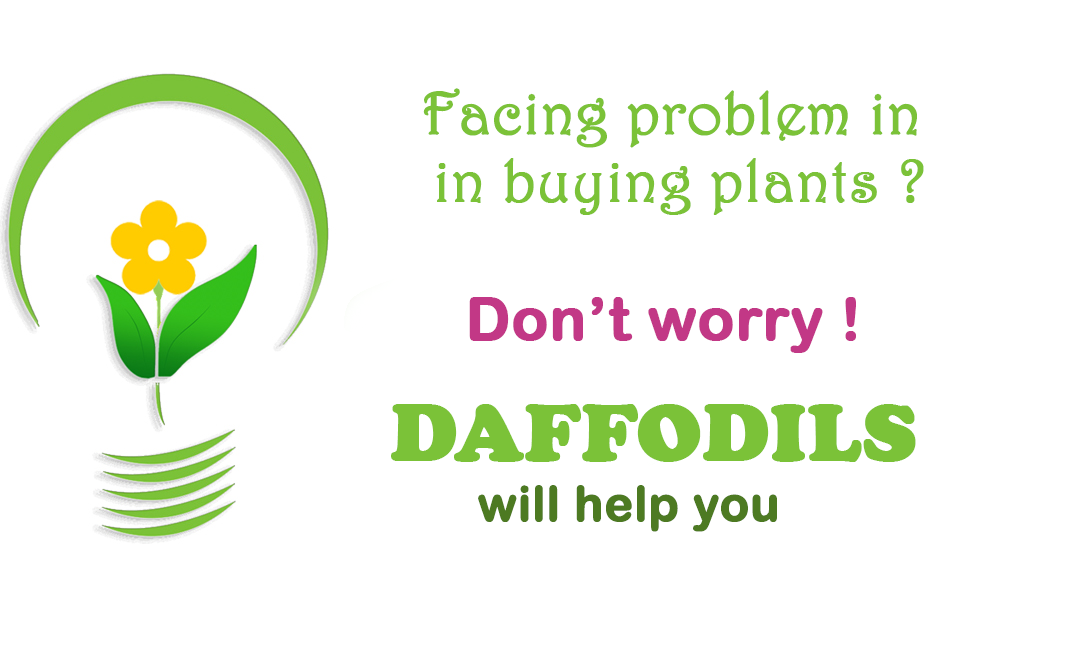
<style>
.page{position:relative;width:1080px;height:648px;background:#ffffff}
.page>*{position:absolute;margin:0}
.t1{font:60px "Harrington";color:#7bc238;font-weight:bold}
.t2{font:60px "ArialRoundedMTBold";color:#c23886;font-weight:bold}
.t3{font:82px "CooperBlack";color:#7bc238;font-weight:bold}
.t4{font:48px "ArialRoundedMTBold";color:#4d7a22;font-weight:bold}
</style>
<div class="page">
<p class="t1" style="left:423px;top:88px;width:494px;height:60px">Facing problem in</p>
<p class="t1" style="left:436px;top:158px;width:488px;height:57px">in buying plants ?</p>
<p class="t2" style="left:469px;top:297px;width:387px;height:56px">Don’t worry !</p>
<p class="t3" style="left:391px;top:404px;width:525px;height:58px">DAFFODILS</p>
<p class="t4" style="left:478px;top:485px;width:299px;height:47px">will help you</p>
</div>
